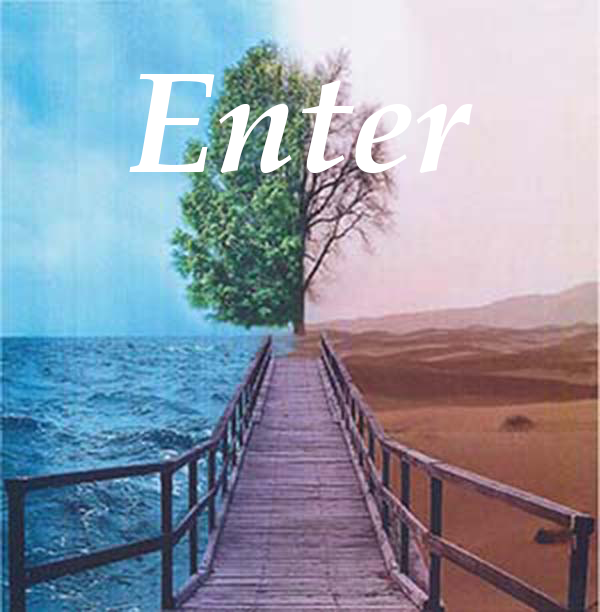
<style>
.page{position:relative;width:600px;height:612px}
.page>*{position:absolute;margin:0}
.t1{font:141.7px "BookAntiqua-BoldItalic";color:#ffffff}
</style>
<div class="page">
<p class="t1" style="left:129px;top:74px;width:344px;height:99px">Enter</p>
</div>
